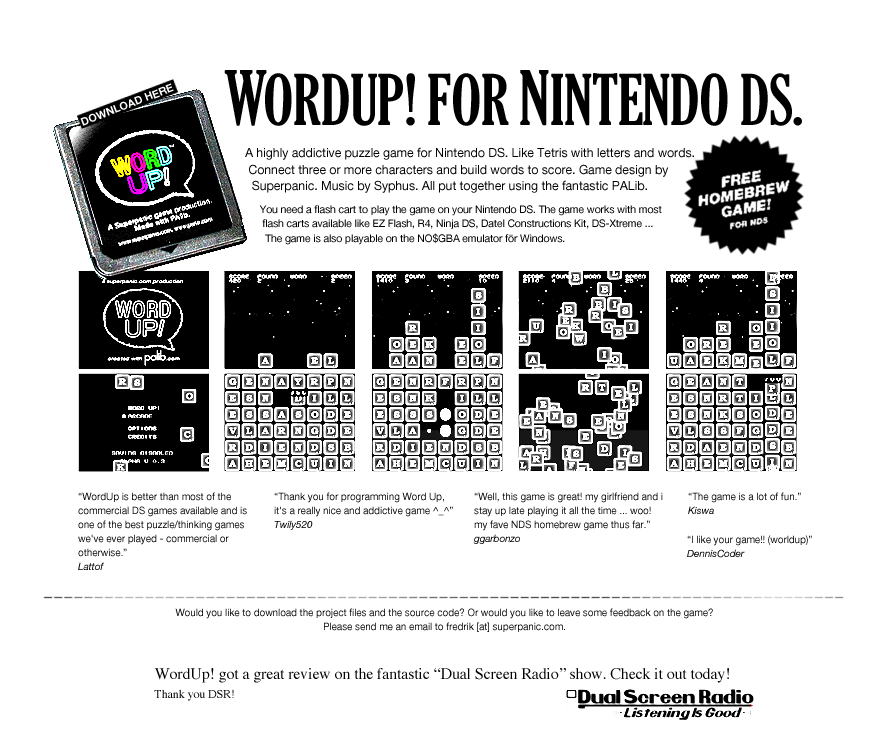
<style>
.page{position:relative;width:873px;height:752px;background:#ffffff}
.page>*{position:absolute;margin:0}
.t1{font:67.6px "GloucesterMT-ExtraCondensed";letter-spacing:-0.01em;color:#000000}
.t2{font:72.4px "GloucesterMT-ExtraCondensed";letter-spacing:-0.01em;color:#000000}
.t3{font:12.5px/16.6px "HelveticaNeue-Roman";letter-spacing:-0.01em;color:#000000}
.t4{font:10.4px/14.6px "HelveticaNeue-Roman";letter-spacing:-0.01em;color:#000000}
.t5{font:10px/14px "HelveticaNeue-Roman";letter-spacing:-0.01em;color:#000000}
.t6{font:10px/14px "HelveticaNeue-Italic";letter-spacing:-0.01em;color:#000000}
.t7{font:16px/18.6px "Times-Roman";letter-spacing:-0.01em;color:#000000}
.t8{font:12px/18.6px "Times-Roman";letter-spacing:-0.01em;color:#000000}
</style>
<div class="page">
<p class="t1" style="left:224px;top:70px;width:578px;height:56px"><span class="t2">W</span>ORDUP! FOR <span class="t2">N</span>INTENDO DS.</p>
<p class="t3" style="left:245px;top:147px;width:449px;height:46px">A highly addictive puzzle game for Nintendo DS. Like Tetris with letters and words.<br> Connect three or more characters and build words to score. Game design by<br>  Superpanic. Music by Syphus. All put together using the fantastic PALib.</p>
<p class="t4" style="left:259px;top:205px;width:403px;height:40px">You need a flash cart to play the game on your Nintendo DS. The game works with most<br> flash carts available like EZ Flash, R4, Ninja DS, Datel Constructions Kit, DS-Xtreme ...<br>  The game is also playable on the NO$GBA emulator för Windows.</p>
<p class="t5" style="left:78px;top:492px;width:169px;height:78px">“WordUp is better than most of the commercial DS games available and is one of the best puzzle/thinking games we've ever played - commercial or otherwise.”<br><span class="t6">Lattof</span></p>
<p class="t5" style="left:274px;top:492px;width:179px;height:38px">“Thank you for programming Word Up, it's a really nice and addictive game ^_^”<br><span class="t6">Twily520</span></p>
<p class="t5" style="left:473px;top:492px;width:190px;height:52px">“Well, this game is great! my girlfriend and i stay up late playing it all the time ... woo! my fave NDS homebrew game thus far.”<br><span class="t6">ggarbonzo</span></p>
<p class="t5" style="left:688px;top:492px;width:113px;height:22px">“The game is a lot of fun.”<br><span class="t6">Kiswa</span></p>
<p class="t5" style="left:687px;top:535px;width:125px;height:23px">“I like your game!! (worldup)”<br><span class="t6">DennisCoder</span></p>
<p class="t5" style="left:175px;top:608px;width:538px;height:24px;text-align:center">Would you like to download the project files and the source code? Or would you like to leave some feedback on the game? <br>Please send me an email to fredrik [at] superpanic.com.</p>
<p class="t7" style="left:154px;top:668px;width:575px;height:33px">WordUp! got a great review on the fantastic “Dual Screen Radio” show. Check it out today!<br><span class="t8">Thank you DSR!</span></p>
</div>
